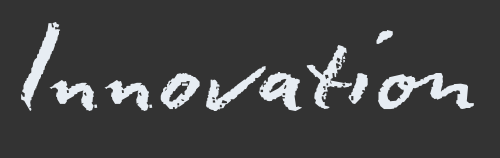
<style>
.page{position:relative;width:500px;height:158px;background:#333333}
.page>*{position:absolute;margin:0}
.t1{font:116.7px "ConteScriptreduced";color:#e7edf3}
</style>
<div class="page">
<p class="t1" style="left:21px;top:22px;width:453px;height:89px">Innovation</p>
</div>
